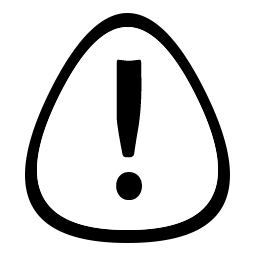
<style>
.page{position:relative;width:256px;height:256px;background:#ffffff}
.page>*{position:absolute;margin:0}
.t1{font:200px "BerlinSansFB-Reg";color:#000000}
</style>
<div class="page">
<p class="t1" style="left:116px;top:59px;width:26px;height:141px">!</p>
</div>
